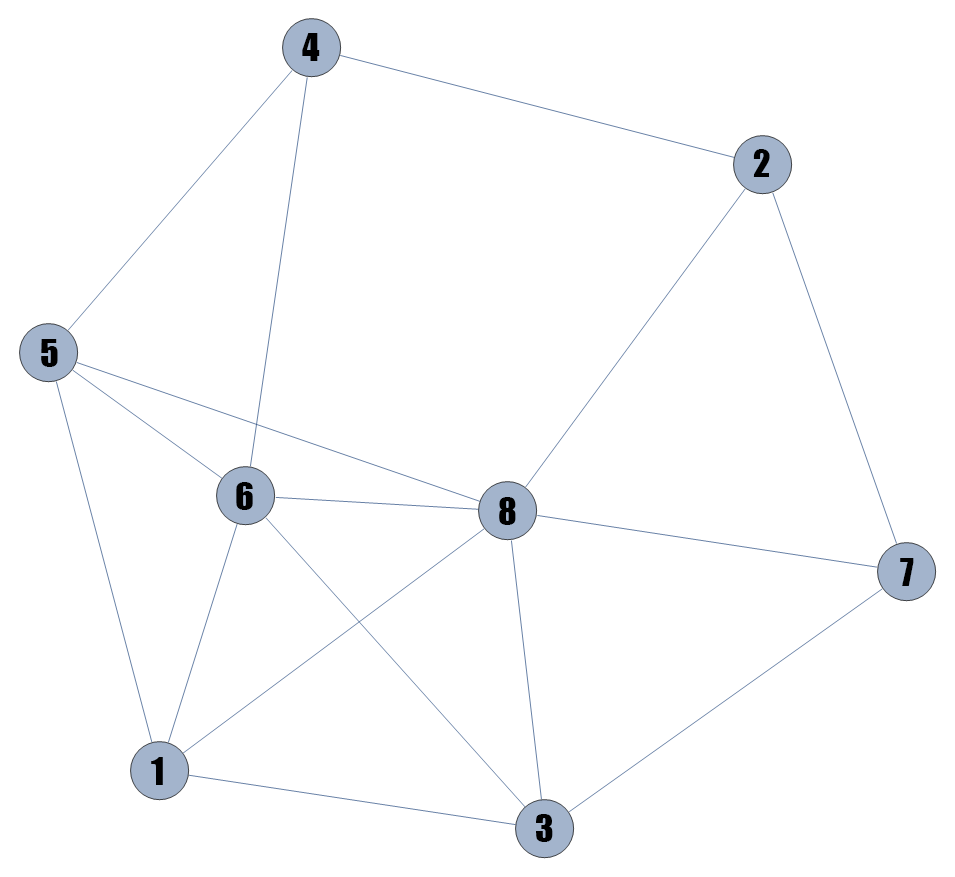
<style>
.page{position:relative;width:955px;height:877px;background:#ffffff}
.page>*{position:absolute;margin:0}
.t1{font:35px "Impact";color:#000000}
</style>
<div class="page">
<p class="t1" style="left:302px;top:33px;width:18px;height:28px">4</p>
<p class="t1" style="left:753px;top:149px;width:17px;height:28px">2</p>
<p class="t1" style="left:41px;top:339px;width:17px;height:28px">5</p>
<p class="t1" style="left:236px;top:482px;width:17px;height:28px">6</p>
<p class="t1" style="left:499px;top:497px;width:17px;height:28px">8</p>
<p class="t1" style="left:900px;top:558px;width:14px;height:28px">7</p>
<p class="t1" style="left:151px;top:757px;width:12px;height:28px">1</p>
<p class="t1" style="left:536px;top:814px;width:17px;height:28px">3</p>
</div>
